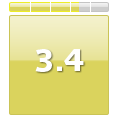
<style>
.page{position:relative;width:117px;height:117px;background:#dad35d}
.page>*{position:absolute;margin:0}
.t1{font:36px "Colaborate-Bold";color:#ffffff;text-transform:uppercase}
</style>
<div class="page">
<p class="t1" style="left:35px;top:49px;width:49px;height:23px">3.4</p>
</div>
